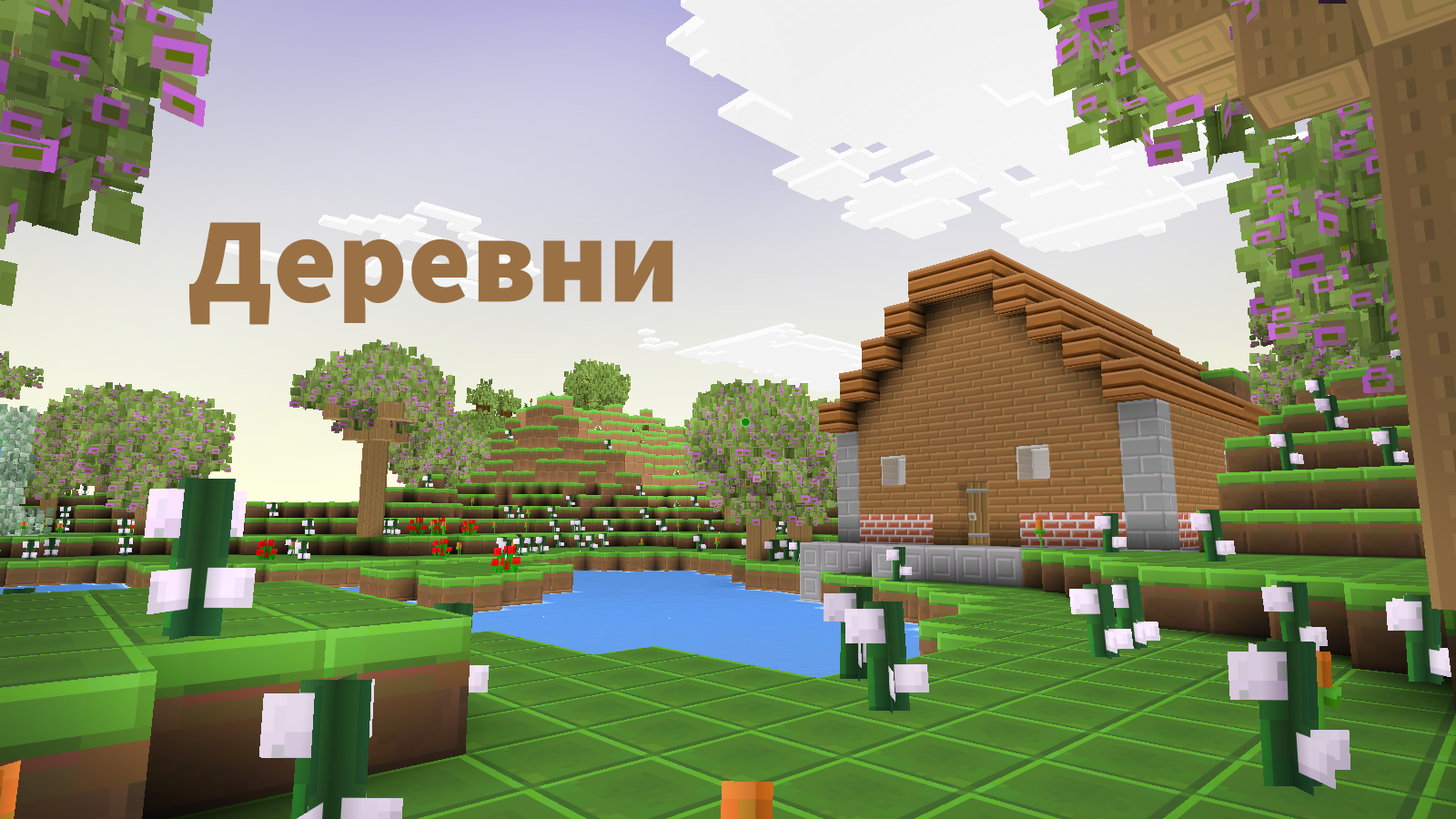
<style>
.page{position:relative;width:1456px;height:819px}
.page>*{position:absolute;margin:0}
.t1{font:121.3px "SourceSansRoman-Black";color:#9a7144}
</style>
<div class="page">
<p class="t1" style="left:189px;top:222px;width:484px;height:103px">Деревни</p>
</div>
